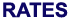
<style>
.page{position:relative;width:74px;height:22px;background:#ffffff}
.page>*{position:absolute;margin:0}
.t1{font:20px "Arial-BoldMT";color:#0d0664}
</style>
<div class="page">
<p class="t1" style="left:3px;top:2px;width:65px;height:16px">RATES</p>
</div>
